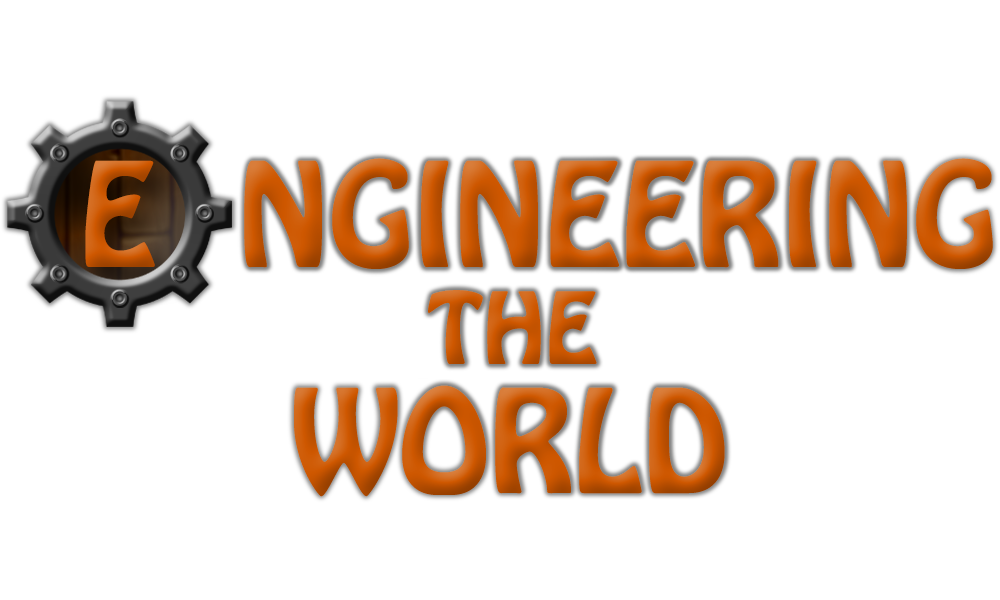
<style>
.page{position:relative;width:1000px;height:600px;background:#ffffff}
.page>*{position:absolute;margin:0}
.t1{font:127.7px "HoboStd"}
.t2{font:127.7px "HoboStd";color:#ce5700}
.t3{font:87.4px "HoboStd";color:#ce5700}
.t4{font:126.6px "HoboStd";color:#ce5700}
</style>
<div class="page">
<p class="t1" style="left:85px;top:160px;width:70px;height:107px">E</p>
<p class="t2" style="left:244px;top:158px;width:749px;height:111px">NGINEERING</p>
<p class="t3" style="left:428px;top:290px;width:169px;height:75px">THE</p>
<p class="t4" style="left:294px;top:385px;width:431px;height:112px">WORLD</p>
</div>
